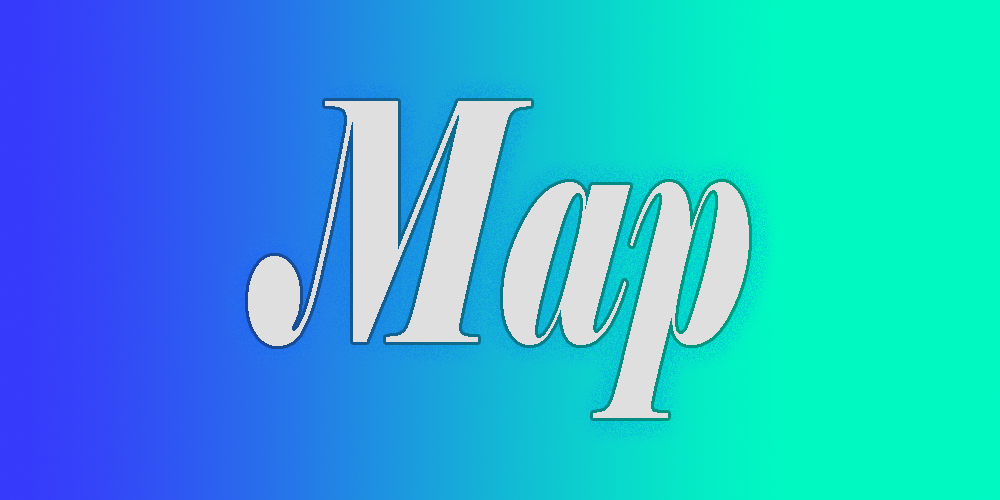
<style>
.page{position:relative;width:1000px;height:500px}
.page>*{position:absolute;margin:0}
.t1{font:330.8px "Elephant-Italic";color:#dfdfdf;scale:0.59 1}
</style>
<div class="page">
<p class="t1" style="left:248px;top:101px;width:501px;height:317px">Map</p>
</div>
